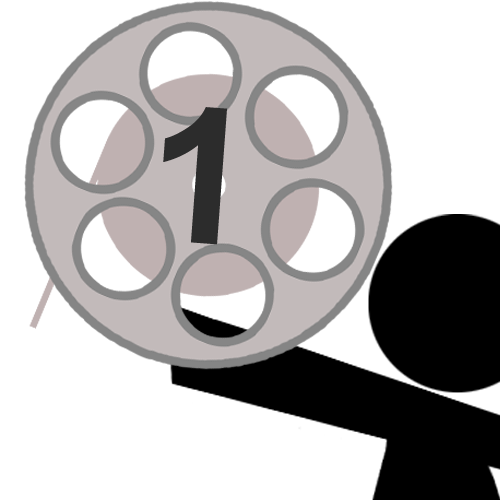
<style>
.page{position:relative;width:500px;height:500px;background:#ffffff}
.page>*{position:absolute;margin:0}
.t1{font:189px "Arial-BoldMT";color:#2c2c2c}
</style>
<div class="page">
<p class="t1" style="left:163px;top:107px;width:64px;height:138px;rotate:4deg">1</p>
</div>
